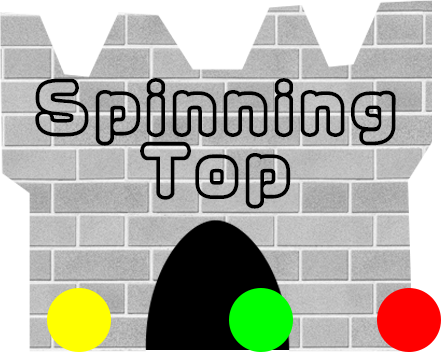
<style>
.page{position:relative;width:441px;height:352px}
.page>*{position:absolute;margin:0}
.t1{font:66.4px/63.2px "VDL-MegaMaru-pop-FutoLine";color:#000000}
</style>
<div class="page">
<p class="t1" style="left:35px;top:78px;width:361px;height:131px;text-align:center">Spinning<br>Top</p>
</div>
